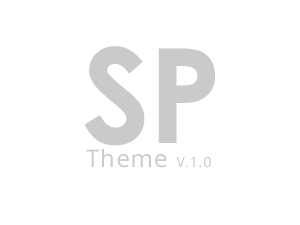
<style>
.page{position:relative;width:300px;height:225px;background:#ffffff}
.page>*{position:absolute;margin:0}
.t1{font:131.5px "CenturyGothic-Bold";color:#cacaca}
.t2{font:24px "OpenSans";letter-spacing:0.05em;color:#cacaca}
.t3{font:14px "OpenSans";letter-spacing:0.05em;color:#cacaca}
</style>
<div class="page">
<p class="t1" style="left:84px;top:46px;width:132px;height:100px">SP</p>
<p class="t2" style="left:86px;top:149px;width:125px;height:19px">Theme <span class="t3">V.1.0</span></p>
</div>
